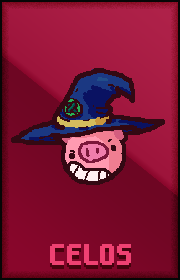
<style>
.page{position:relative;width:180px;height:280px}
.page>*{position:absolute;margin:0}
.t1{font:31px "m6x11";color:#ef4172;scale:1.18 1}
</style>
<div class="page">
<p class="t1" style="left:50px;top:244px;width:81px;height:21px">CELOS</p>
</div>
